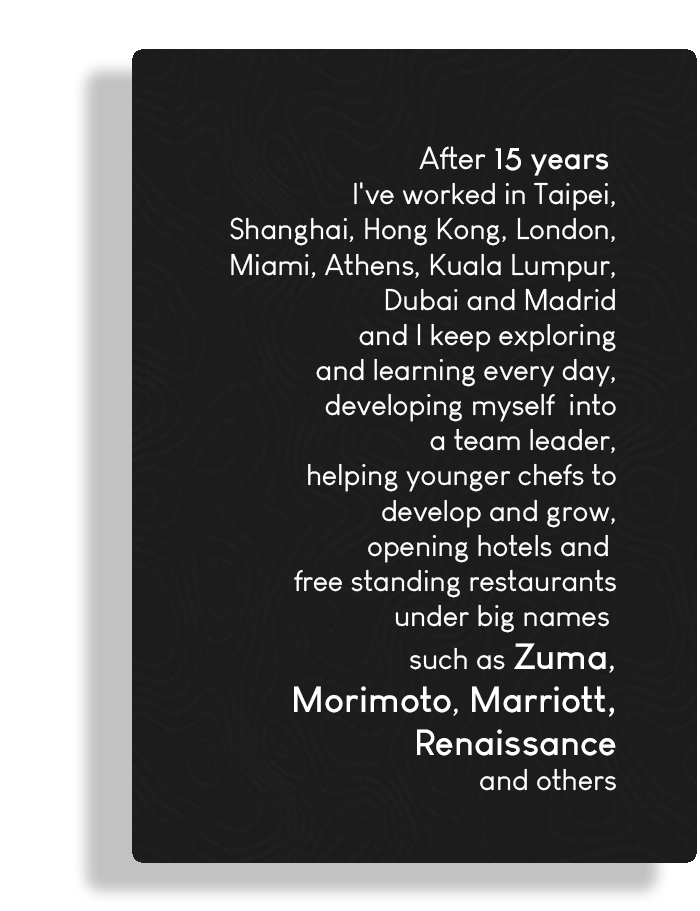
<style>
.page{position:relative;width:700px;height:911px;background:#1c1c1c}
.page>*{position:absolute;margin:0}
.t1{font:29.3px "LouisGeorgeCafe";color:#ffffff}
.t2{font:30.9px "LouisGeorgeCafe";color:#ffffff}
.t3{font:30.9px "LouisGeorgeCafe-Bold";color:#ffffff}
.t4{font:35.8px "LouisGeorgeCafe-Bold";color:#ffffff}
.t5{font:35.8px "LouisGeorgeCafe";color:#ffffff}
</style>
<div class="page">
<p class="t1" style="left:230px;top:146px;width:386px;height:645px;text-align:right"><span class="t2">After </span><span class="t3">15 years <br></span>I've worked in Taipei,<br> Shanghai, Hong Kong, London,<br> Miami, Athens, Kuala Lumpur,<br> Dubai and Madrid<br>  and I keep exploring<br> and learning every day,<br> developing myself  into<br> a team leader,<br> helping younger chefs to<br> develop and grow,<br> opening hotels and <br>free standing restaurants<br>under big names <br>such as <span class="t4">Zuma</span><span class="t5">,<br></span><span class="t4">Morimoto</span><span class="t5">, </span><span class="t4">Marriott,<br>Renaissance<br></span>and others</p>
</div>
